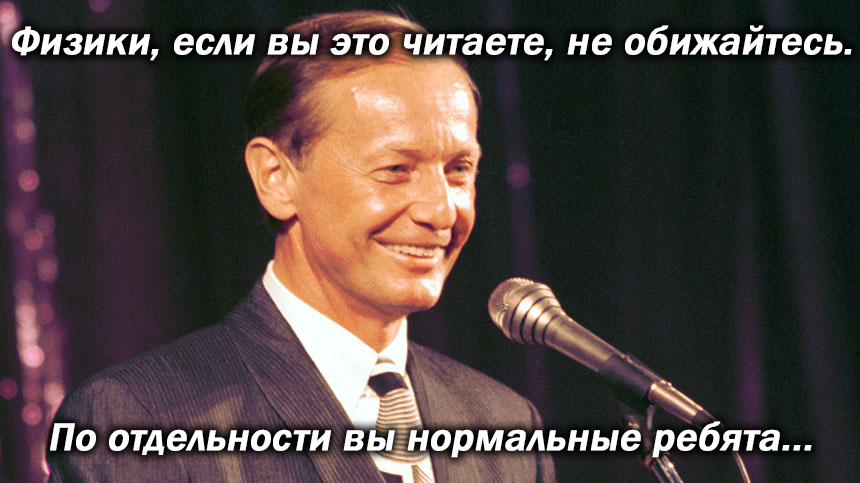
<style>
.page{position:relative;width:860px;height:483px}
.page>*{position:absolute;margin:0}
.t1{font:40px "FranklinGothic-Medium";color:#ffffff;font-weight:bold;font-style:italic}
</style>
<div class="page">
<p class="t1" style="left:12px;top:25px;width:840px;height:36px">Физики, если вы это читаете, не обижайтесь.</p>
<p class="t1" style="left:50px;top:421px;width:762px;height:37px">По отдельности вы нормальные ребята...</p>
</div>
